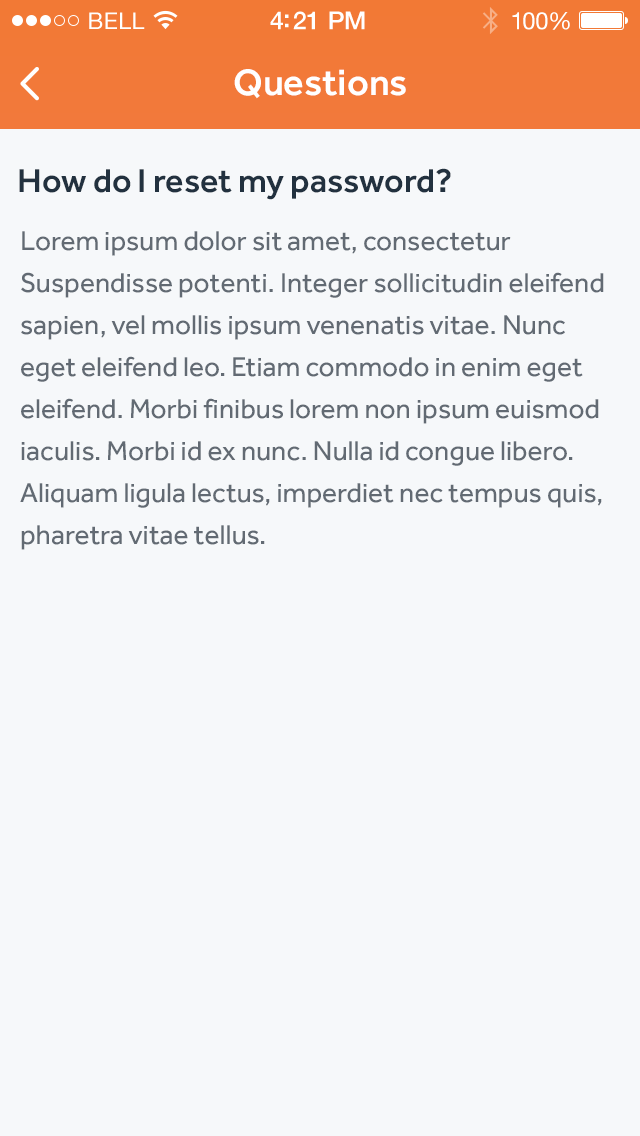
<style>
.page{position:relative;width:640px;height:1136px;background:#f6f8fa}
.page>*{position:absolute;margin:0}
.t1{font:23px "HelveticaNeue";letter-spacing:0.02em;color:#ffffff}
.t2{font:25px "HelveticaNeue-Medium";letter-spacing:-0.02em;color:#ffffff}
.t3{font:24px "HelveticaNeue";letter-spacing:-0.02em;color:#ffffff}
.t4{font:38px "Effra-Medium";color:#ffffff}
.t5{font:34px "Effra-Medium";color:#22313f}
.t6{font:28px/42px "Effra-Regular";color:#626a73}
</style>
<div class="page">
<p class="t1" style="left:89px;top:12px;width:56px;height:17px">BELL</p>
<p class="t2" style="left:270px;top:11px;width:95px;height:19px">4:21 PM</p>
<p class="t3" style="left:512px;top:12px;width:58px;height:18px">100%</p>
<p class="t4" style="left:234px;top:69px;width:172px;height:30px">Questions</p>
<p class="t5" style="left:19px;top:168px;width:432px;height:32px">How do I reset my password?</p>
<p class="t6" style="left:20px;top:231px;width:584px;height:319px">Lorem ipsum dolor sit amet, consectetur Suspendisse potenti. Integer sollicitudin eleifend sapien, vel mollis ipsum venenatis vitae. Nunc eget eleifend leo. Etiam commodo in enim eget eleifend. Morbi finibus lorem non ipsum euismod iaculis. Morbi id ex nunc. Nulla id congue libero. Aliquam ligula lectus, imperdiet nec tempus quis, pharetra vitae tellus.</p>
</div>
